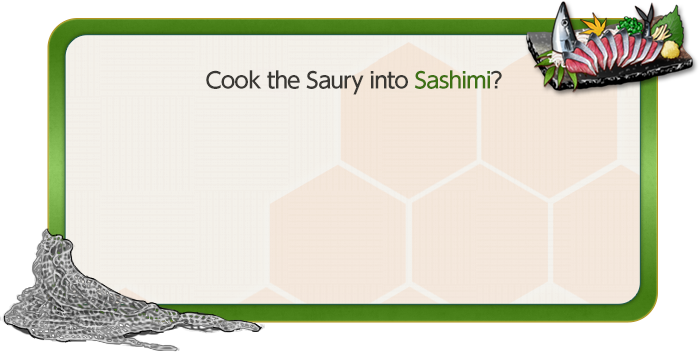
<style>
.page{position:relative;width:699px;height:352px;background:#ffffff}
.page>*{position:absolute;margin:0}
.t1{font:22px "UDShinGoPro-Medium";letter-spacing:-0.04em;color:#3b3935}
.t2{font:22px "UDShinGoPro-Medium";letter-spacing:-0.04em;color:#3e7115}
</style>
<div class="page">
<p class="t1" style="left:206px;top:70px;width:296px;height:25px">Cook the Saury into <span class="t2">Sashimi</span>?</p>
</div>
